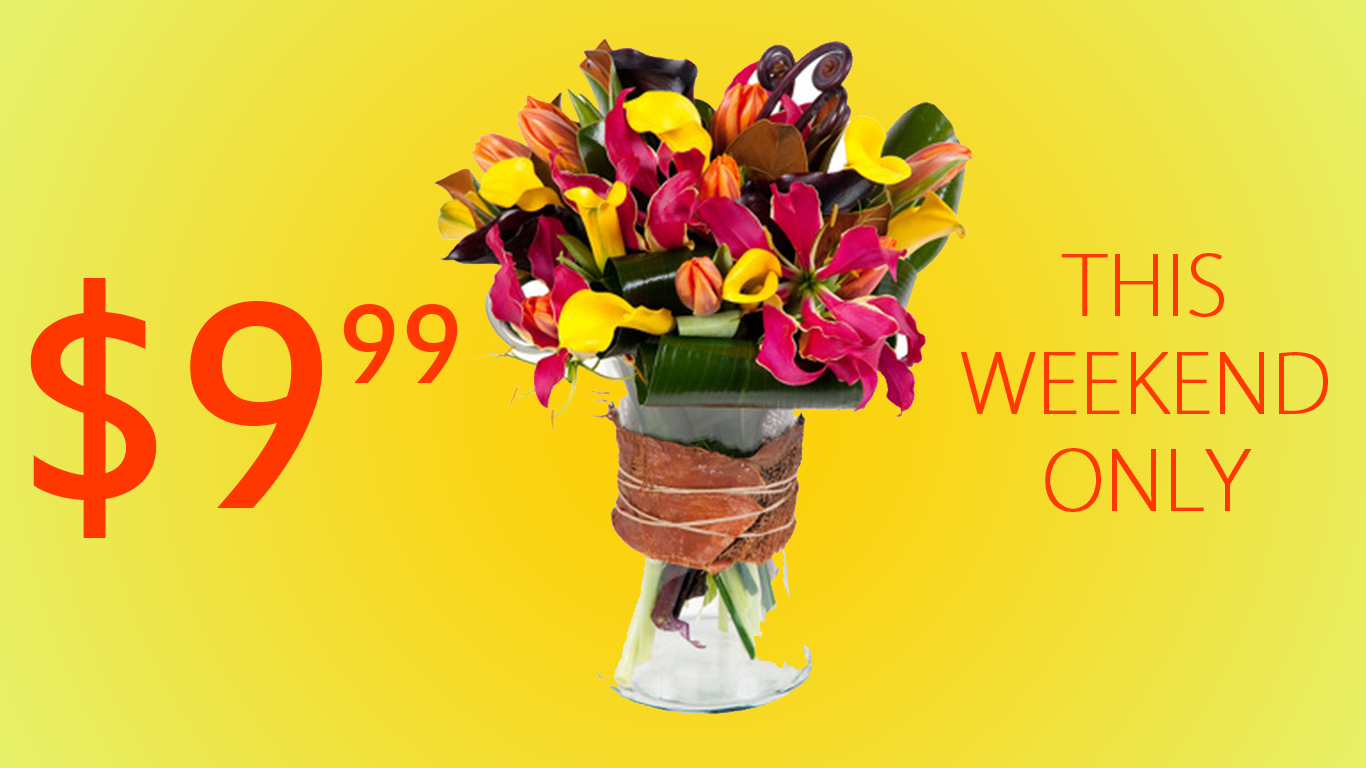
<style>
.page{position:relative;width:1366px;height:768px}
.page>*{position:absolute;margin:0}
.t1{font:81px "KozGoPro-ExtraLight";color:#ff3701;text-transform:uppercase;font-weight:bold}
.t2{font:71px "KozGoPro-ExtraLight";color:#ff3701;text-transform:uppercase;font-weight:bold}
.t3{font:324px "EstrangeloEdessa";color:#ff3701;text-transform:uppercase}
.t4{font:124px "EstrangeloEdessa";color:#ff3701;text-transform:uppercase}
</style>
<div class="page">
<p class="t1" style="left:961px;top:253px;width:367px;height:259px;text-align:center"><span class="t2"><br></span>this weekend only</p>
<p class="t3" style="left:30px;top:277px;width:428px;height:261px">$9<span class="t4">99</span></p>
</div>
